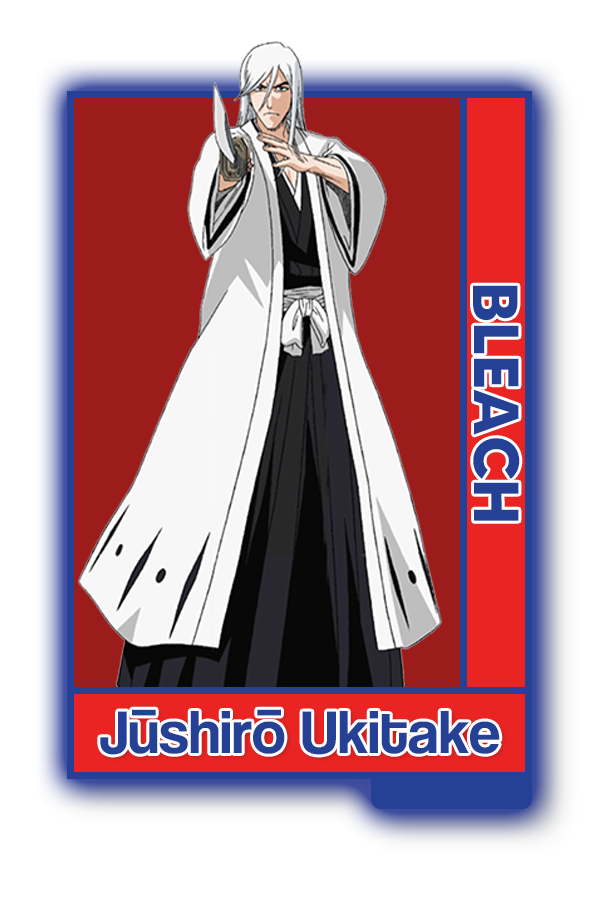
<style>
.page{position:relative;width:600px;height:900px;background:#ffffff}
.page>*{position:absolute;margin:0}
.t1{font:63.6px "MADETOMMY-Bold";color:#254195}
.t2{font:62.5px "CoolveticaRg-Regular";color:#254195}
</style>
<div class="page">
<p class="t1" style="left:473px;top:285px;width:47px;height:236px;rotate:90deg">BLEACH</p>
<p class="t2" style="left:100px;top:709px;width:400px;height:46px">Jūshirō Ukitake</p>
</div>
